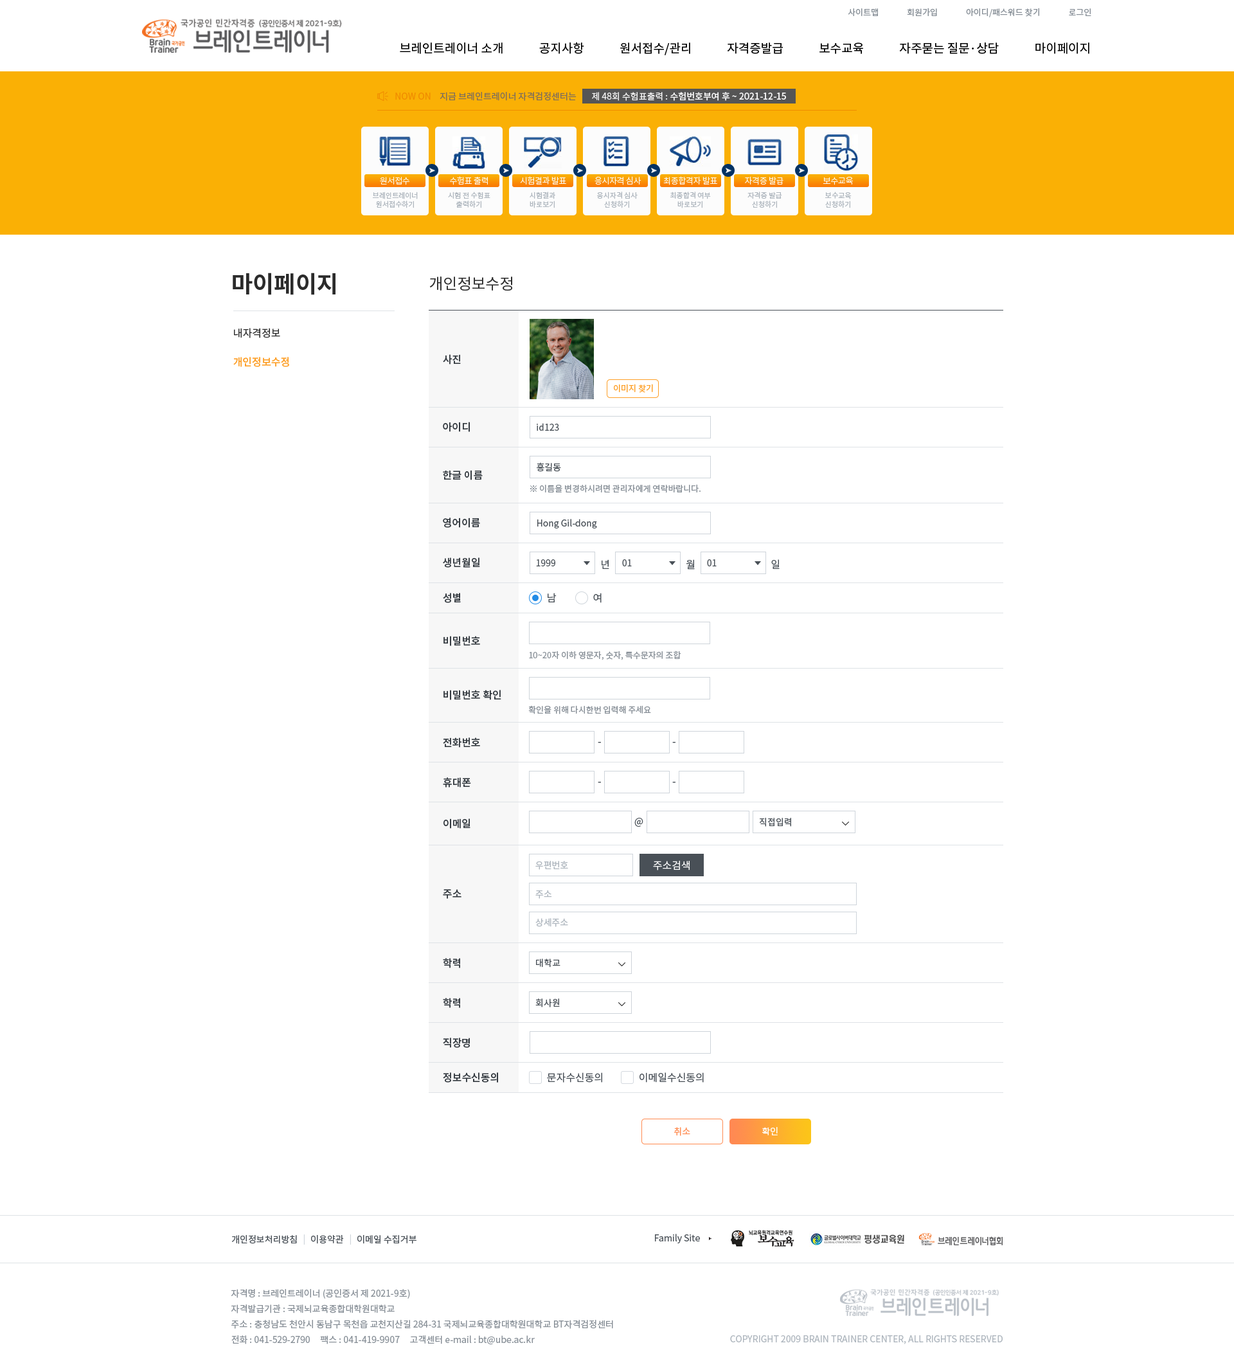
<style>
.page{position:relative;width:1234px;height:1370px;background:#ffffff}
.page>*{position:absolute;margin:0}
.t1{font:8.4px "NotoSansCJKkr-Regular";letter-spacing:0.001em;color:#868e96}
.t2{font:12.2px "NotoSansCJKkr-Regular";color:#000000}
.t3{font:9px "NotoSansCJKkr-Regular";color:#f08c00}
.t4{font:9px "NotoSansCJKkr-Regular";color:#7c6d5d}
.t5{font:9px "NotoSansCJKkr-Medium";color:#f8f8f8}
.t6{font:9px "NotoSansCJKkr-Regular";color:#f8f8f8}
.t7{font:8.4px "NotoSansCJKkr-Light";letter-spacing:-0.025em;color:#fcfcfc}
.t8{font:7.1px/9px "NotoSansCJKkr-Regular";color:#adb5bd}
.t9{font:23.1px "NotoSansCJKkr-Bold";color:#2b2b2b}
.t10{font:15.4px "NotoSansCJKkr-Regular";color:#2b2b2b}
.t11{font:10.3px "NotoSansCJKkr-Regular";color:#2b2b2b}
.t12{font:10.3px "NotoSansCJKkr-Medium";color:#fd9f27}
.t13{font:10.3px "NotoSansCJKkr-Medium";color:#343a40}
.t14{font:8.4px "NotoSansCJKkr-Regular";color:#fd9f27}
.t15{font:9px "NotoSansCJKkr-Regular";color:#495057}
.t16{font:8.4px "NotoSansCJKkr-Regular";color:#868e96}
.t17{font:9px "NotoSansCJKkr-Regular";color:#495057;text-transform:uppercase}
.t18{font:10.3px "NotoSansCJKkr-Regular";color:#495057;text-transform:uppercase}
.t19{font:10.3px "NotoSansCJKkr-Medium";color:#343a40;text-transform:uppercase}
.t20{font:8.4px "NotoSansCJKkr-Regular";color:#868e96;text-transform:uppercase}
.t21{font:9.6px "NotoSansCJKkr-Regular";color:#495057;text-transform:uppercase}
.t22{font:9px "NotoSansCJKkr-Regular";color:#adb5bd;text-transform:uppercase}
.t23{font:10.3px "NotoSansCJKkr-Regular";color:#ffffff;text-transform:uppercase}
.t24{font:9px "NotoSansCJKkr-Regular";color:#ff8b51}
.t25{font:9px "NotoSansCJKkr-Regular";color:#ffffff}
.t26{font:9px "NotoSansCJKkr-Regular";color:#ced4da}
.t27{font:9px/15.4px "NotoSansCJKkr-Regular";color:#868e96}
.t28{font:9px "NotoSansCJKkr-Regular";color:#adb5bd}
</style>
<div class="page">
<p class="t1" style="left:848px;top:8px;width:244px;height:9px">사이트맵               회원가입               아이디/패스워드 찾기               로그인</p>
<p class="t2" style="left:400px;top:42px;width:690px;height:13px">브레인트레이너 소개             공지사항             원서접수/관리             자격증발급             보수교육             자주묻는 질문·상담             마이페이지</p>
<p class="t3" style="left:395px;top:93px;width:36px;height:7px">NOW ON</p>
<p class="t4" style="left:440px;top:92px;width:137px;height:9px">지금 브레인트레이너 자격검정센터는</p>
<p class="t5" style="left:592px;top:92px;width:194px;height:9px"><span class="t6">제 48회 수험표출력 : </span>수험번호부여 후 ~ 2021-12-15</p>
<p class="t7" style="left:380px;top:177px;width:30px;height:8px">원서접수</p>
<p class="t7" style="left:450px;top:176px;width:38px;height:9px">수험표 출력</p>
<p class="t7" style="left:520px;top:176px;width:46px;height:8px">시험결과 발표</p>
<p class="t7" style="left:595px;top:176px;width:47px;height:9px">응시자격 심사</p>
<p class="t7" style="left:663px;top:176px;width:54px;height:9px">최종합격자 발표</p>
<p class="t7" style="left:745px;top:176px;width:39px;height:9px">자격증 발급</p>
<p class="t7" style="left:823px;top:177px;width:30px;height:8px">보수교육</p>
<p class="t8" style="left:373px;top:192px;width:45px;height:16px;text-align:center">브레인트레이너<br>원서접수하기</p>
<p class="t8" style="left:448px;top:192px;width:43px;height:16px;text-align:center">시험 전 수험표<br>출력하기</p>
<p class="t8" style="left:530px;top:192px;width:25px;height:16px;text-align:center">시험결과<br>바로보기</p>
<p class="t8" style="left:597px;top:192px;width:41px;height:16px;text-align:center">응시자격 심사<br>신청하기</p>
<p class="t8" style="left:670px;top:192px;width:41px;height:16px;text-align:center">최종합격 여부<br>바로보기</p>
<p class="t8" style="left:748px;top:192px;width:34px;height:16px;text-align:center">자격증 발급<br>신청하기</p>
<p class="t8" style="left:825px;top:192px;width:27px;height:16px;text-align:center">보수교육<br>신청하기</p>
<p class="t9" style="left:233px;top:273px;width:103px;height:22px">마이페이지</p>
<p class="t10" style="left:429px;top:276px;width:83px;height:15px">개인정보수정</p>
<p class="t11" style="left:234px;top:328px;width:46px;height:10px">내자격정보</p>
<p class="t12" style="left:233px;top:357px;width:56px;height:10px">개인정보수정</p>
<p class="t13" style="left:443px;top:354px;width:18px;height:10px">사진</p>
<p class="t14" style="left:614px;top:384px;width:39px;height:9px">이미지 찾기</p>
<p class="t13" style="left:443px;top:422px;width:27px;height:10px">아이디</p>
<p class="t15" style="left:537px;top:423px;width:22px;height:8px">id123</p>
<p class="t13" style="left:443px;top:470px;width:40px;height:10px">한글 이름</p>
<p class="t15" style="left:537px;top:462px;width:24px;height:10px">홍길동</p>
<p class="t16" style="left:530px;top:484px;width:171px;height:9px">※ 이름을 변경하시려면 관리자에게 연락바랍니다.</p>
<p class="t13" style="left:443px;top:518px;width:37px;height:10px">영어이름</p>
<p class="t15" style="left:537px;top:519px;width:60px;height:9px">Hong Gil-dong</p>
<p class="t13" style="left:443px;top:557px;width:37px;height:11px">생년월일</p>
<p class="t17" style="left:536px;top:559px;width:19px;height:7px">1999</p>
<p class="t18" style="left:602px;top:559px;width:7px;height:10px">년</p>
<p class="t17" style="left:622px;top:559px;width:10px;height:7px">01</p>
<p class="t18" style="left:687px;top:559px;width:8px;height:11px">월</p>
<p class="t17" style="left:707px;top:559px;width:10px;height:7px">01</p>
<p class="t18" style="left:771px;top:559px;width:9px;height:10px">일</p>
<p class="t19" style="left:443px;top:593px;width:18px;height:10px">성별</p>
<p class="t18" style="left:548px;top:593px;width:9px;height:9px">남</p>
<p class="t18" style="left:593px;top:593px;width:9px;height:10px">여</p>
<p class="t19" style="left:444px;top:636px;width:36px;height:10px">비밀번호</p>
<p class="t20" style="left:529px;top:651px;width:152px;height:9px">10~20자 이하 영문자, 숫자, 특수문자의 조합</p>
<p class="t19" style="left:444px;top:690px;width:57px;height:10px">비밀번호 확인</p>
<p class="t20" style="left:528px;top:705px;width:123px;height:9px">확인을 위해 다시한번 입력해 주세요</p>
<p class="t19" style="left:443px;top:737px;width:37px;height:11px">전화번호</p>
<p class="t18" style="left:598px;top:742px;width:3px;height:1px">-</p>
<p class="t18" style="left:672px;top:742px;width:4px;height:1px">-</p>
<p class="t19" style="left:443px;top:777px;width:28px;height:11px">휴대폰</p>
<p class="t18" style="left:598px;top:782px;width:3px;height:1px">-</p>
<p class="t18" style="left:672px;top:782px;width:4px;height:1px">-</p>
<p class="t19" style="left:444px;top:818px;width:27px;height:11px">이메일</p>
<p class="t21" style="left:634px;top:818px;width:10px;height:9px">@</p>
<p class="t17" style="left:760px;top:818px;width:31px;height:9px">직접입력</p>
<p class="t22" style="left:536px;top:861px;width:32px;height:9px">우편번호</p>
<p class="t23" style="left:653px;top:860px;width:37px;height:10px">주소검색</p>
<p class="t19" style="left:443px;top:889px;width:19px;height:10px">주소</p>
<p class="t22" style="left:536px;top:890px;width:16px;height:9px">주소</p>
<p class="t22" style="left:536px;top:918px;width:32px;height:9px">상세주소</p>
<p class="t19" style="left:443px;top:958px;width:17px;height:10px">학력</p>
<p class="t17" style="left:536px;top:959px;width:25px;height:9px">대학교</p>
<p class="t19" style="left:443px;top:998px;width:17px;height:10px">학력</p>
<p class="t17" style="left:536px;top:998px;width:24px;height:9px">회사원</p>
<p class="t19" style="left:443px;top:1038px;width:27px;height:10px">직장명</p>
<p class="t19" style="left:443px;top:1072px;width:55px;height:11px">정보수신동의</p>
<p class="t18" style="left:547px;top:1072px;width:55px;height:11px">문자수신동의</p>
<p class="t18" style="left:640px;top:1072px;width:64px;height:11px">이메일수신동의</p>
<p class="t24" style="left:674px;top:1127px;width:16px;height:9px">취소</p>
<p class="t25" style="left:762px;top:1127px;width:16px;height:8px">확인</p>
<p class="t15" style="left:231px;top:1235px;width:66px;height:9px">개인정보처리방침</p>
<p class="t26" style="left:303px;top:1234px;width:2px;height:11px">|</p>
<p class="t15" style="left:311px;top:1235px;width:33px;height:9px">이용약관</p>
<p class="t26" style="left:350px;top:1234px;width:1px;height:11px">|</p>
<p class="t15" style="left:357px;top:1235px;width:60px;height:9px">이메일 수집거부</p>
<p class="t15" style="left:655px;top:1234px;width:45px;height:9px">Family Site</p>
<p class="t27" style="left:231px;top:1289px;width:382px;height:56px">자격명 : 브레인트레이너 (공인증서 제 2021-9호)<br>자격발급기관 : 국제뇌교육종합대학원대학교<br>주소 : 충청남도 천안시 동남구 목천읍 교천지산길 284-31 국제뇌교육종합대학원대학교 BT자격검정센터<br>전화 : 041-529-2790     팩스 : 041-419-9907     고객센터 e-mail : bt@ube.ac.kr</p>
<p class="t28" style="left:730px;top:1335px;width:273px;height:9px">COPYRIGHT 2009 BRAIN TRAINER CENTER, ALL RIGHTS RESERVED</p>
</div>
